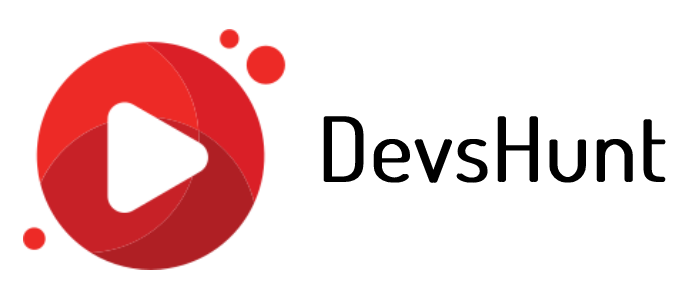
<style>
.page{position:relative;width:700px;height:300px;background:#ffffff}
.page>*{position:absolute;margin:0}
.t1{font:90px "Dosis-Regular";color:#000000;font-weight:bold}
</style>
<div class="page">
<p class="t1" style="left:323px;top:116px;width:343px;height:67px">DevsHunt</p>
</div>
